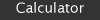
<style>
.page{position:relative;width:100px;height:20px;background:#333333}
.page>*{position:absolute;margin:0}
.t1{font:14px "LucidaSans";color:#ffffff}
.t2{font:10px "LucidaSans";color:#ffffff}
</style>
<div class="page">
<p class="t1" style="left:16px;top:2px;width:68px;height:11px"><span class="t2">  </span> Calculator</p>
</div>
